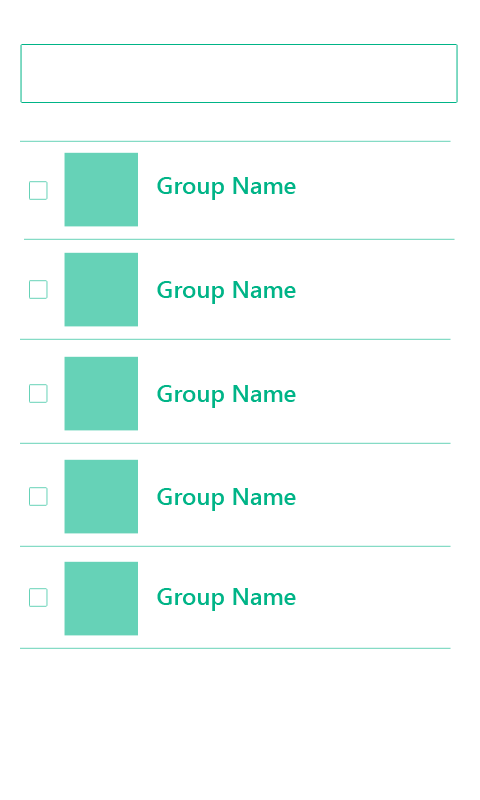
<style>
.page{position:relative;width:480px;height:800px;background:#ffffff}
.page>*{position:absolute;margin:0}
.t1{font:24px "SegoeUI-Semibold";color:#00b487}
</style>
<div class="page">
<p class="t1" style="left:157px;top:177px;width:139px;height:23px">Group Name</p>
<p class="t1" style="left:157px;top:281px;width:139px;height:23px">Group Name</p>
<p class="t1" style="left:157px;top:385px;width:139px;height:23px">Group Name</p>
<p class="t1" style="left:157px;top:488px;width:139px;height:23px">Group Name</p>
<p class="t1" style="left:157px;top:588px;width:139px;height:23px">Group Name</p>
</div>
